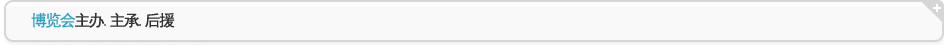
<style>
.page{position:relative;width:949px;height:45px;background:#f9f9f9}
.page>*{position:absolute;margin:0}
.t1{font:16px "SimHei";letter-spacing:-0.1em;color:#323131}
.t2{font:16px "SimHei";letter-spacing:-0.1em;color:#2ea2c2}
</style>
<div class="page">
<p class="t1" style="left:31px;top:12px;width:144px;height:16px"><span class="t2">博览会</span>主办.主承.后援</p>
</div>
